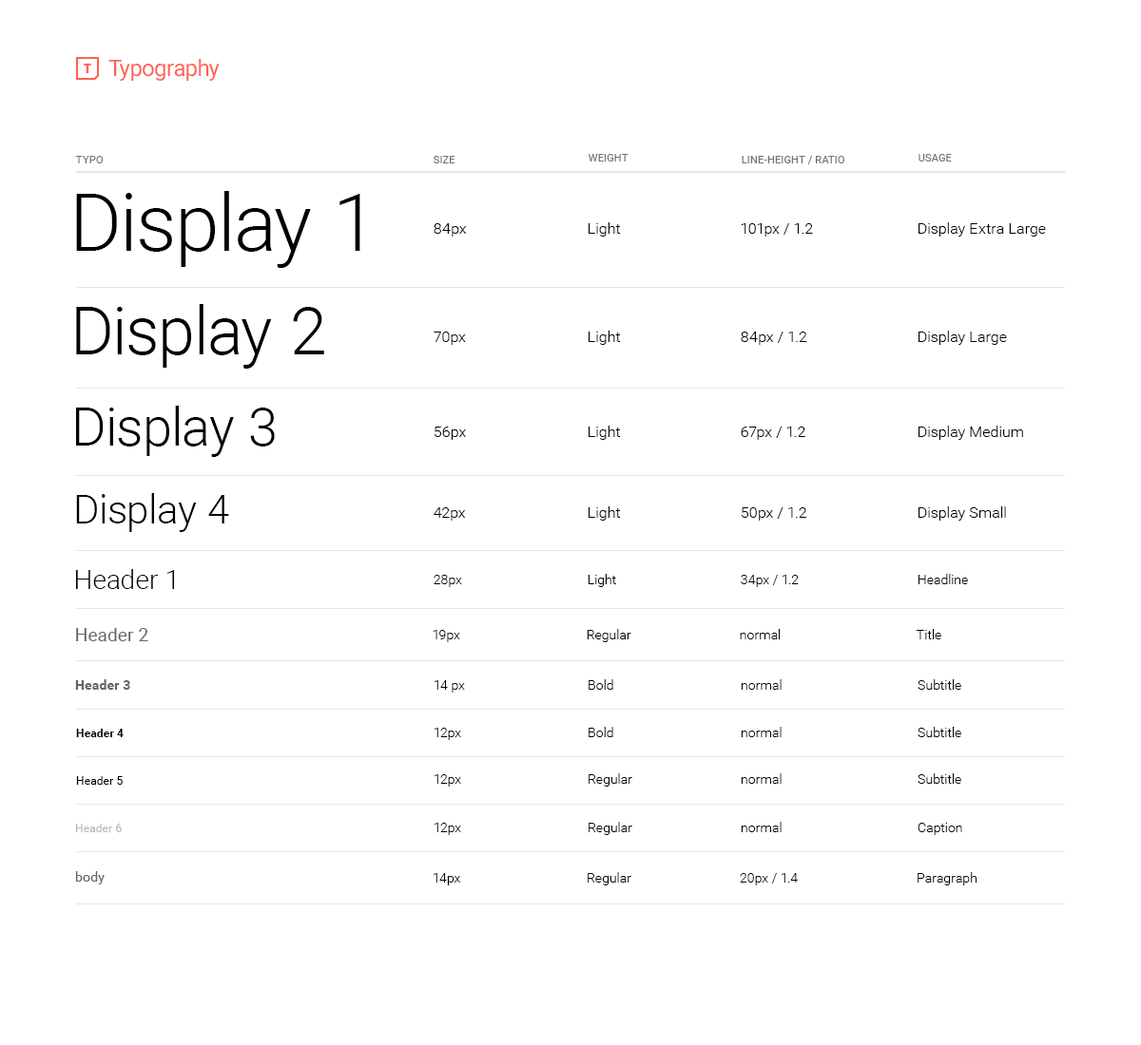
<style>
.page{position:relative;width:1141px;height:1045px;background:#ffffff}
.page>*{position:absolute;margin:0}
.t1{font:22.8px "Roboto-Regular";letter-spacing:-0.025em;color:#ff6153}
.t2{font:10.5px "Roboto-Regular";letter-spacing:0.01em;color:#737373;text-transform:uppercase}
.t3{font:79.8px "Roboto-Light";letter-spacing:0.01em;color:#000000}
.t4{font:15.2px "Roboto-Light";letter-spacing:0.01em;color:#000000}
.t5{font:66.5px "Roboto-Light";letter-spacing:0.01em;color:#000000}
.t6{font:53.2px "Roboto-Light";letter-spacing:0.01em;color:#000000}
.t7{font:39.9px "Roboto-Light";letter-spacing:0.01em;color:#000000}
.t8{font:26.6px "Roboto-Light";letter-spacing:0.01em;color:#000000}
.t9{font:13.3px "Roboto-Light";letter-spacing:0.01em;color:#000000}
.t10{font:18.1px "Roboto-Regular";letter-spacing:0.01em;color:#656565}
.t11{font:13.3px "Roboto-Bold";letter-spacing:0.01em;color:#656565}
.t12{font:11.4px "Roboto-Bold";letter-spacing:0.01em;color:#000000}
.t13{font:11.4px "Roboto-Regular";letter-spacing:0.01em;color:#000000}
.t14{font:11.4px "Roboto-Regular";letter-spacing:0.01em;color:#bababa}
.t15{font:13.3px "Roboto-Regular";letter-spacing:0.01em;color:#656565}
</style>
<div class="page">
<p class="t1" style="left:108px;top:59px;width:112px;height:22px">Typography</p>
<p class="t2" style="left:75px;top:156px;width:28px;height:7px">typo</p>
<p class="t2" style="left:433px;top:156px;width:22px;height:7px">size</p>
<p class="t2" style="left:588px;top:154px;width:40px;height:8px">weight</p>
<p class="t2" style="left:741px;top:156px;width:103px;height:8px">line-height / ratio</p>
<p class="t2" style="left:918px;top:154px;width:33px;height:8px">usage</p>
<p class="t3" style="left:76px;top:191px;width:284px;height:77px">Display 1</p>
<p class="t4" style="left:433px;top:223px;width:34px;height:14px">84px</p>
<p class="t4" style="left:588px;top:222px;width:33px;height:15px">Light</p>
<p class="t4" style="left:741px;top:223px;width:72px;height:14px">101px / 1.2</p>
<p class="t4" style="left:918px;top:222px;width:127px;height:15px">Display Extra Large</p>
<p class="t5" style="left:76px;top:304px;width:248px;height:65px">Display 2</p>
<p class="t4" style="left:433px;top:332px;width:33px;height:13px">70px</p>
<p class="t4" style="left:588px;top:331px;width:33px;height:14px">Light</p>
<p class="t4" style="left:740px;top:332px;width:67px;height:13px">84px / 1.2</p>
<p class="t4" style="left:918px;top:331px;width:89px;height:14px">Display Large</p>
<p class="t6" style="left:76px;top:406px;width:199px;height:51px">Display 3</p>
<p class="t4" style="left:588px;top:426px;width:33px;height:14px">Light</p>
<p class="t4" style="left:918px;top:426px;width:105px;height:14px">Display Medium</p>
<p class="t4" style="left:433px;top:427px;width:33px;height:13px">56px</p>
<p class="t4" style="left:740px;top:427px;width:65px;height:13px">67px / 1.2</p>
<p class="t7" style="left:76px;top:493px;width:153px;height:39px">Display 4</p>
<p class="t4" style="left:433px;top:508px;width:33px;height:13px">42px</p>
<p class="t4" style="left:588px;top:507px;width:33px;height:14px">Light</p>
<p class="t4" style="left:740px;top:508px;width:67px;height:13px">50px / 1.2</p>
<p class="t4" style="left:918px;top:507px;width:88px;height:14px">Display Small</p>
<p class="t8" style="left:75px;top:569px;width:100px;height:20px">Header 1</p>
<p class="t9" style="left:433px;top:575px;width:29px;height:12px">28px</p>
<p class="t9" style="left:587px;top:574px;width:29px;height:13px">Light</p>
<p class="t9" style="left:740px;top:575px;width:58px;height:12px">34px / 1.2</p>
<p class="t9" style="left:917px;top:574px;width:51px;height:11px">Headline</p>
<p class="t10" style="left:76px;top:628px;width:72px;height:14px">Header 2</p>
<p class="t9" style="left:586px;top:629px;width:45px;height:14px">Regular</p>
<p class="t9" style="left:739px;top:629px;width:41px;height:11px">normal</p>
<p class="t9" style="left:916px;top:629px;width:25px;height:11px">Title</p>
<p class="t9" style="left:432px;top:630px;width:28px;height:13px">19px</p>
<p class="t11" style="left:75px;top:680px;width:55px;height:10px">Header 3</p>
<p class="t9" style="left:434px;top:681px;width:31px;height:12px">14 px</p>
<p class="t9" style="left:588px;top:680px;width:25px;height:10px">Bold</p>
<p class="t9" style="left:740px;top:680px;width:41px;height:10px">normal</p>
<p class="t9" style="left:917px;top:680px;width:44px;height:10px">Subtitle</p>
<p class="t12" style="left:76px;top:729px;width:48px;height:9px">Header 4</p>
<p class="t9" style="left:434px;top:728px;width:27px;height:12px">12px</p>
<p class="t9" style="left:588px;top:727px;width:25px;height:11px">Bold</p>
<p class="t9" style="left:740px;top:727px;width:41px;height:11px">normal</p>
<p class="t9" style="left:917px;top:727px;width:44px;height:11px">Subtitle</p>
<p class="t9" style="left:588px;top:774px;width:44px;height:13px">Regular</p>
<p class="t9" style="left:740px;top:774px;width:41px;height:10px">normal</p>
<p class="t9" style="left:917px;top:774px;width:44px;height:10px">Subtitle</p>
<p class="t13" style="left:76px;top:777px;width:47px;height:8px">Header 5</p>
<p class="t9" style="left:434px;top:775px;width:27px;height:12px">12px</p>
<p class="t14" style="left:75px;top:824px;width:47px;height:9px">Header 6</p>
<p class="t9" style="left:434px;top:823px;width:27px;height:12px">12px</p>
<p class="t9" style="left:588px;top:822px;width:44px;height:13px">Regular</p>
<p class="t9" style="left:740px;top:822px;width:41px;height:11px">normal</p>
<p class="t9" style="left:917px;top:823px;width:45px;height:12px">Caption</p>
<p class="t15" style="left:75px;top:872px;width:30px;height:13px">body</p>
<p class="t9" style="left:433px;top:873px;width:28px;height:13px">14px</p>
<p class="t9" style="left:587px;top:873px;width:44px;height:13px">Regular</p>
<p class="t9" style="left:739px;top:873px;width:58px;height:13px">20px / 1.4</p>
<p class="t9" style="left:917px;top:873px;width:59px;height:13px">Paragraph</p>
</div>
